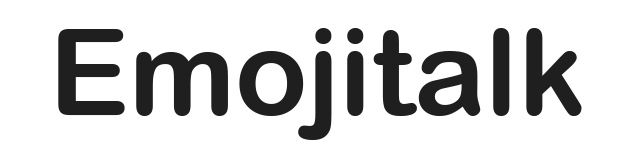
<style>
.page{position:relative;width:640px;height:160px;background:#ffffff}
.page>*{position:absolute;margin:0}
.t1{font:119.5px "ArialRoundedMTBold";color:#1f1f1f}
</style>
<div class="page">
<p class="t1" style="left:58px;top:28px;width:524px;height:112px">Emojitalk</p>
</div>
